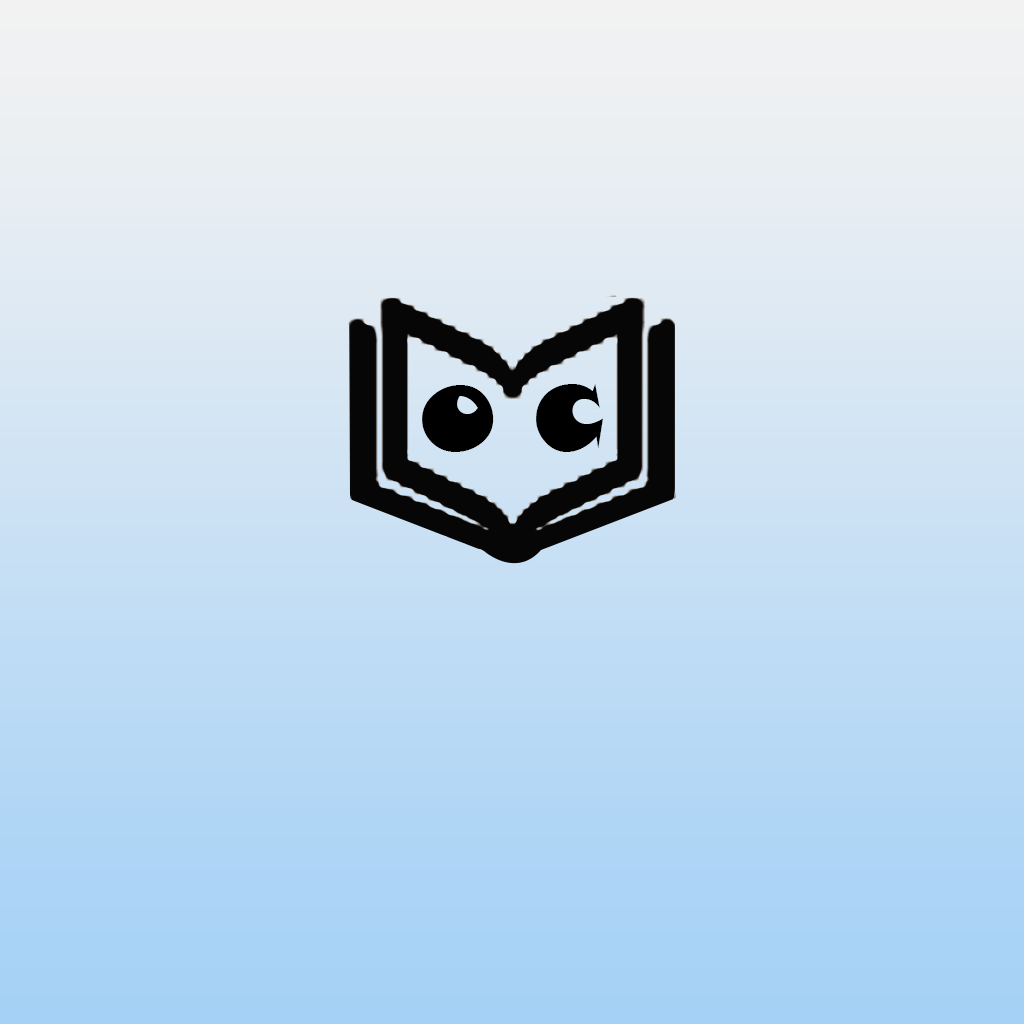
<style>
.page{position:relative;width:1024px;height:1024px}
.page>*{position:absolute;margin:0}
.t1{font:90px "SnapITC-Regular";color:#000000}
</style>
<div class="page">
<p class="t1" style="left:422px;top:384px;width:181px;height:68px">O C</p>
</div>
